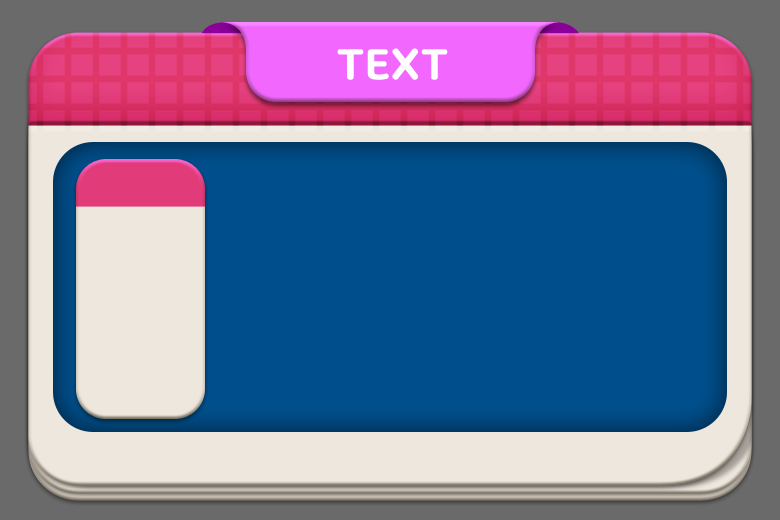
<style>
.page{position:relative;width:780px;height:520px;background:#004f8c}
.page>*{position:absolute;margin:0}
.t1{font:40px "Binggrae-Bold";color:#ffffff;font-weight:bold}
</style>
<div class="page">
<p class="t1" style="left:337px;top:48px;width:111px;height:32px">TEXT</p>
</div>
